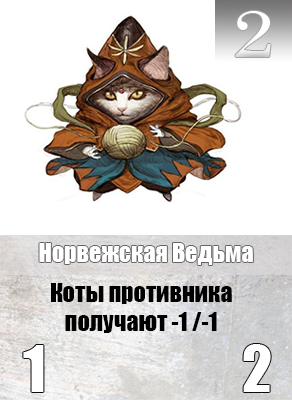
<style>
.page{position:relative;width:292px;height:400px;background:#ffffff}
.page>*{position:absolute;margin:0}
.t1{font:65.6px "Century";color:#ffffff;scale:1.18 1}
.t2{font:24px "Impact";color:#ffffff}
.t3{font:24px "Impact";color:#000000}
</style>
<div class="page">
<p class="t1" style="left:235px;top:11px;width:36px;height:46px">2</p>
<p class="t2" style="left:39px;top:243px;width:214px;height:22px">Норвежская Ведьма</p>
<p class="t3" style="left:51px;top:283px;width:181px;height:50px;text-align:center">Коты противника получают -1 /-1</p>
</div>
